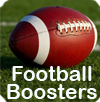
<style>
.page{position:relative;width:100px;height:102px}
.page>*{position:absolute;margin:0}
.t1{font:21px "ArialRoundedMTBold";color:#f6fafd}
</style>
<div class="page">
<p class="t1" style="left:12px;top:66px;width:80px;height:15px">Football</p>
<p class="t1" style="left:7px;top:84px;width:90px;height:15px">Boosters</p>
</div>
